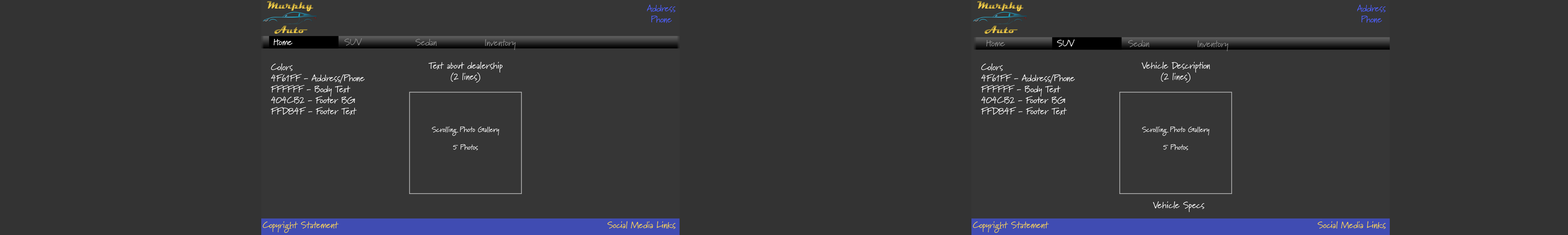
<style>
.page{position:relative;width:1568px;height:235px;background:#333333}
.page>*{position:absolute;margin:0}
.t1{font:10.8px "Magneto-Bold"}
.t2{font:9.2px "Marydale-Regular";color:#4f61ff}
.t3{font:9.2px "Marydale-Regular";color:#ffffff}
.t4{font:9.2px "Marydale-Regular";color:#8b8b8b}
.t5{font:7.3px "Marydale-Regular";color:#ffffff}
.t6{font:9.2px "Marydale-Regular";color:#ffd84f}
</style>
<div class="page">
<p class="t1" style="left:267px;top:1px;width:47px;height:10px">Murphy</p>
<p class="t2" style="left:647px;top:5px;width:29px;height:18px;text-align:center">Address<br>Phone</p>
<p class="t1" style="left:977px;top:1px;width:47px;height:10px">Murphy</p>
<p class="t2" style="left:1357px;top:5px;width:29px;height:18px;text-align:center">Address<br>Phone</p>
<p class="t1" style="left:274px;top:26px;width:33px;height:8px">Auto</p>
<p class="t1" style="left:984px;top:26px;width:34px;height:8px">Auto</p>
<p class="t3" style="left:273px;top:39px;width:19px;height:6px">Home</p>
<p class="t4" style="left:344px;top:38px;width:18px;height:8px">SUV</p>
<p class="t4" style="left:415px;top:39px;width:22px;height:7px">Sedan</p>
<p class="t4" style="left:485px;top:39px;width:31px;height:11px">Inventory</p>
<p class="t4" style="left:986px;top:40px;width:19px;height:7px">Home</p>
<p class="t3" style="left:1057px;top:40px;width:18px;height:7px">SUV</p>
<p class="t4" style="left:1128px;top:40px;width:21px;height:7px">Sedan</p>
<p class="t4" style="left:1198px;top:40px;width:30px;height:11px">Inventory</p>
<p class="t3" style="left:271px;top:63px;width:94px;height:52px">Colors<br>4F61FF - Address/Phone<br>FFFFFF - Body Text<br>404CB2 - Footer BG<br>FFD84F - Footer Text</p>
<p class="t3" style="left:428px;top:62px;width:75px;height:21px;text-align:center">Text about dealership<br>(2 lines)</p>
<p class="t3" style="left:981px;top:63px;width:94px;height:52px">Colors<br>4F61FF - Address/Phone<br>FFFFFF - Body Text<br>404CB2 - Footer BG<br>FFD84F - Footer Text</p>
<p class="t3" style="left:1142px;top:62px;width:68px;height:21px;text-align:center">Vehicle Description<br>(2 lines)</p>
<p class="t5" style="left:432px;top:126px;width:67px;height:24px;text-align:center">Scrolling Photo Gallery<br><br>5 Photos</p>
<p class="t5" style="left:1142px;top:126px;width:67px;height:24px;text-align:center">Scrolling Photo Gallery<br><br>5 Photos</p>
<p class="t3" style="left:1153px;top:202px;width:51px;height:10px">Vehicle Specs</p>
<p class="t6" style="left:263px;top:221px;width:76px;height:12px">Copyright Statement</p>
<p class="t6" style="left:607px;top:221px;width:69px;height:8px">Social Media Links</p>
<p class="t6" style="left:973px;top:221px;width:76px;height:12px">Copyright Statement</p>
<p class="t6" style="left:1317px;top:221px;width:69px;height:8px">Social Media Links</p>
</div>
